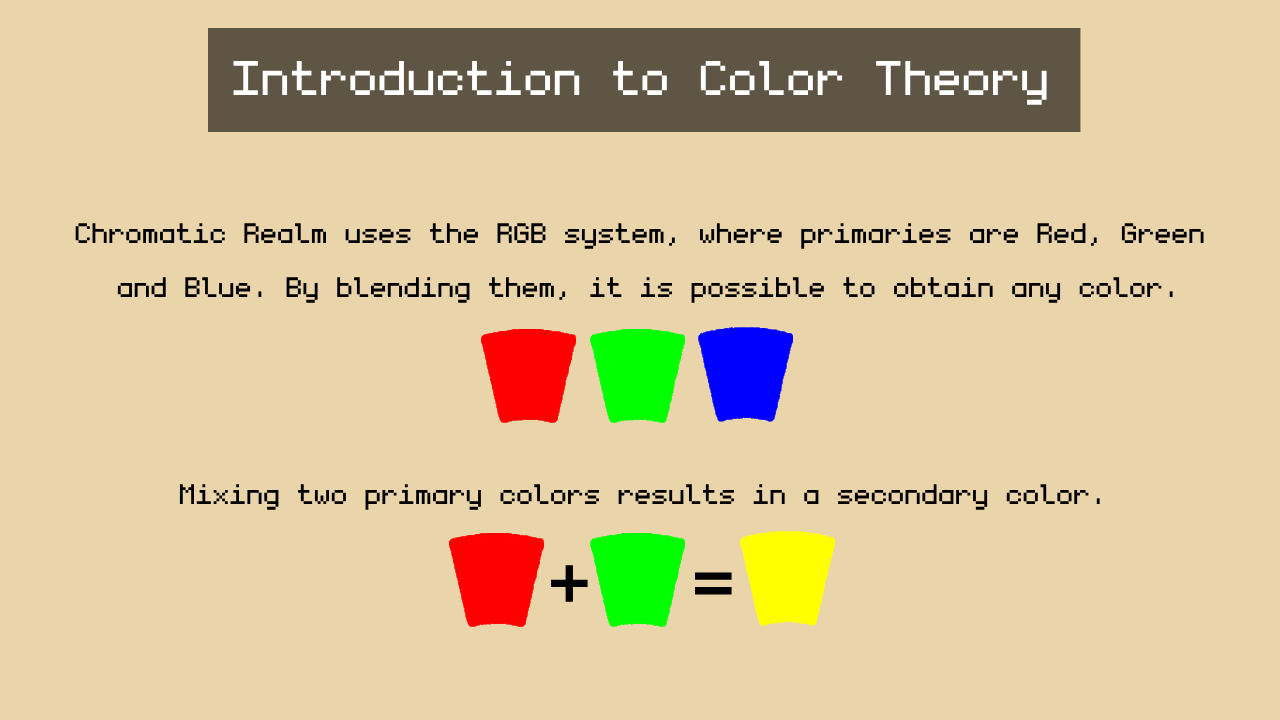
<style>
.page{position:relative;width:1280px;height:720px;background:#ead4aa}
.page>*{position:absolute;margin:0}
.t1{font:77.9px "monogram";color:#ffffff}
.t2{font:45px "monogram";color:#000000}
.t3{font:117px "monogram";color:#000000}
</style>
<div class="page">
<p class="t1" style="left:233px;top:61px;width:814px;height:44px">Introduction to Color Theory</p>
<p class="t2" style="left:75px;top:223px;width:1129px;height:80px;text-align:center">Chromatic Realm uses the RGB system, where primaries are Red, Green<br> and Blue. By blending them, it is possible to obtain any color.</p>
<p class="t2" style="left:179px;top:484px;width:921px;height:26px">Mixing two primary colors results in a secondary color.</p>
<p class="t3" style="left:550px;top:565px;width:38px;height:37px">+</p>
<p class="t3" style="left:694px;top:572px;width:38px;height:23px">=</p>
</div>
